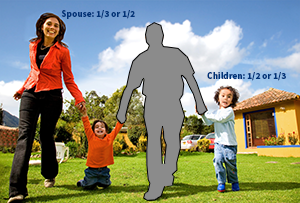
<style>
.page{position:relative;width:300px;height:203px}
.page>*{position:absolute;margin:0}
.t1{font:9.4px "SourceSansPro-Bold";color:#013377}
</style>
<div class="page">
<p class="t1" style="left:61px;top:10px;width:74px;height:9px">Spouse: 1/3 or 1/2</p>
<p class="t1" style="left:207px;top:72px;width:79px;height:9px">Children: 1/2 or 1/3</p>
</div>
